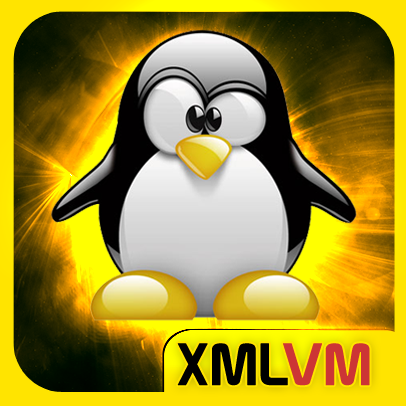
<style>
.page{position:relative;width:406px;height:406px}
.page>*{position:absolute;margin:0}
.t1{font:58.4px "Prototype";color:#000000}
.t2{font:58.4px "Prototype";color:#cc3535}
</style>
<div class="page">
<p class="t1" style="left:177px;top:343px;width:193px;height:43px">XML<span class="t2">VM</span></p>
</div>
